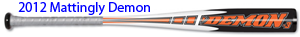
<style>
.page{position:relative;width:300px;height:37px;background:#ffffff}
.page>*{position:absolute;margin:0}
.t1{font:14px "MyriadPro-Regular";color:#0000ff}
</style>
<div class="page">
<p class="t1" style="left:18px;top:2px;width:132px;height:13px">2012 Mattingly Demon</p>
</div>
